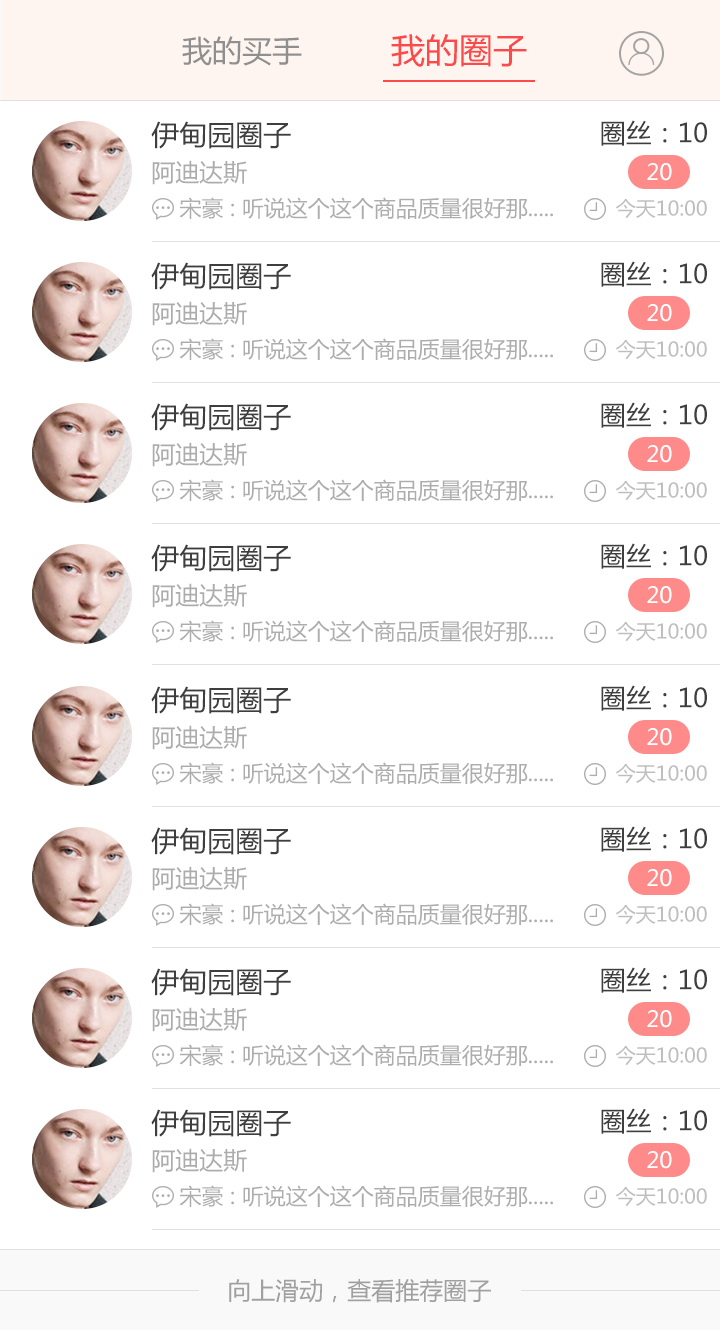
<style>
.page{position:relative;width:720px;height:1330px;background:#ffffff}
.page>*{position:absolute;margin:0}
.t1{font:30px "MicrosoftYaHei";color:#8f8f8f}
.t2{font:34px "MicrosoftYaHei";color:#fc4a4a}
.t3{font:28px "MicrosoftYaHei";color:#3e3e3e}
.t4{font:26px "MicrosoftYaHei";color:#3e3e3e}
.t5{font:24px "MicrosoftYaHei";color:#acacac}
.t6{font:22px "MicrosoftYaHei";color:#ffffff}
.t7{font:22px "MicrosoftYaHei";color:#adadad}
.t8{font:20px "MicrosoftYaHei";color:#bebebe}
.t9{font:24px "MicrosoftYaHei";color:#a0a0a0}
</style>
<div class="page">
<p class="t1" style="left:182px;top:36px;width:120px;height:30px">我的买手</p>
<p class="t2" style="left:391px;top:34px;width:136px;height:33px">我的圈子</p>
<p class="t3" style="left:151px;top:121px;width:140px;height:28px">伊甸园圈子</p>
<p class="t4" style="left:601px;top:120px;width:106px;height:26px">圈丝：10</p>
<p class="t5" style="left:152px;top:160px;width:95px;height:25px">阿迪达斯</p>
<p class="t6" style="left:647px;top:163px;width:25px;height:18px">20</p>
<p class="t7" style="left:179px;top:197px;width:374px;height:22px">宋豪 : 听说这个这个商品质量很好那.....</p>
<p class="t8" style="left:616px;top:199px;width:91px;height:20px">今天10:00</p>
<p class="t3" style="left:151px;top:262px;width:140px;height:28px">伊甸园圈子</p>
<p class="t4" style="left:601px;top:261px;width:106px;height:26px">圈丝：10</p>
<p class="t5" style="left:152px;top:301px;width:95px;height:25px">阿迪达斯</p>
<p class="t6" style="left:647px;top:304px;width:25px;height:18px">20</p>
<p class="t7" style="left:179px;top:338px;width:374px;height:22px">宋豪 : 听说这个这个商品质量很好那.....</p>
<p class="t8" style="left:616px;top:340px;width:91px;height:20px">今天10:00</p>
<p class="t3" style="left:151px;top:403px;width:140px;height:28px">伊甸园圈子</p>
<p class="t4" style="left:601px;top:402px;width:106px;height:26px">圈丝：10</p>
<p class="t5" style="left:152px;top:442px;width:95px;height:25px">阿迪达斯</p>
<p class="t6" style="left:647px;top:445px;width:25px;height:18px">20</p>
<p class="t7" style="left:179px;top:479px;width:374px;height:22px">宋豪 : 听说这个这个商品质量很好那.....</p>
<p class="t8" style="left:616px;top:481px;width:91px;height:20px">今天10:00</p>
<p class="t3" style="left:151px;top:544px;width:140px;height:28px">伊甸园圈子</p>
<p class="t4" style="left:601px;top:543px;width:106px;height:26px">圈丝：10</p>
<p class="t5" style="left:152px;top:583px;width:95px;height:25px">阿迪达斯</p>
<p class="t6" style="left:647px;top:586px;width:25px;height:18px">20</p>
<p class="t7" style="left:179px;top:620px;width:374px;height:22px">宋豪 : 听说这个这个商品质量很好那.....</p>
<p class="t8" style="left:616px;top:622px;width:91px;height:20px">今天10:00</p>
<p class="t3" style="left:151px;top:686px;width:140px;height:28px">伊甸园圈子</p>
<p class="t4" style="left:601px;top:685px;width:106px;height:26px">圈丝：10</p>
<p class="t5" style="left:152px;top:725px;width:95px;height:25px">阿迪达斯</p>
<p class="t6" style="left:647px;top:728px;width:25px;height:18px">20</p>
<p class="t7" style="left:179px;top:762px;width:374px;height:22px">宋豪 : 听说这个这个商品质量很好那.....</p>
<p class="t8" style="left:616px;top:764px;width:91px;height:20px">今天10:00</p>
<p class="t3" style="left:151px;top:827px;width:140px;height:28px">伊甸园圈子</p>
<p class="t4" style="left:601px;top:826px;width:106px;height:26px">圈丝：10</p>
<p class="t5" style="left:152px;top:866px;width:95px;height:25px">阿迪达斯</p>
<p class="t6" style="left:647px;top:869px;width:25px;height:18px">20</p>
<p class="t7" style="left:179px;top:903px;width:374px;height:22px">宋豪 : 听说这个这个商品质量很好那.....</p>
<p class="t8" style="left:616px;top:905px;width:91px;height:20px">今天10:00</p>
<p class="t3" style="left:151px;top:968px;width:140px;height:28px">伊甸园圈子</p>
<p class="t4" style="left:601px;top:967px;width:106px;height:26px">圈丝：10</p>
<p class="t5" style="left:152px;top:1007px;width:95px;height:25px">阿迪达斯</p>
<p class="t6" style="left:647px;top:1010px;width:25px;height:18px">20</p>
<p class="t7" style="left:179px;top:1044px;width:374px;height:22px">宋豪 : 听说这个这个商品质量很好那.....</p>
<p class="t8" style="left:616px;top:1046px;width:91px;height:20px">今天10:00</p>
<p class="t3" style="left:151px;top:1109px;width:140px;height:28px">伊甸园圈子</p>
<p class="t4" style="left:601px;top:1108px;width:106px;height:26px">圈丝：10</p>
<p class="t5" style="left:152px;top:1148px;width:95px;height:25px">阿迪达斯</p>
<p class="t6" style="left:647px;top:1151px;width:25px;height:18px">20</p>
<p class="t7" style="left:179px;top:1185px;width:374px;height:22px">宋豪 : 听说这个这个商品质量很好那.....</p>
<p class="t8" style="left:616px;top:1187px;width:91px;height:20px">今天10:00</p>
<p class="t9" style="left:229px;top:1279px;width:262px;height:24px">向上滑动，查看推荐圈子</p>
</div>
